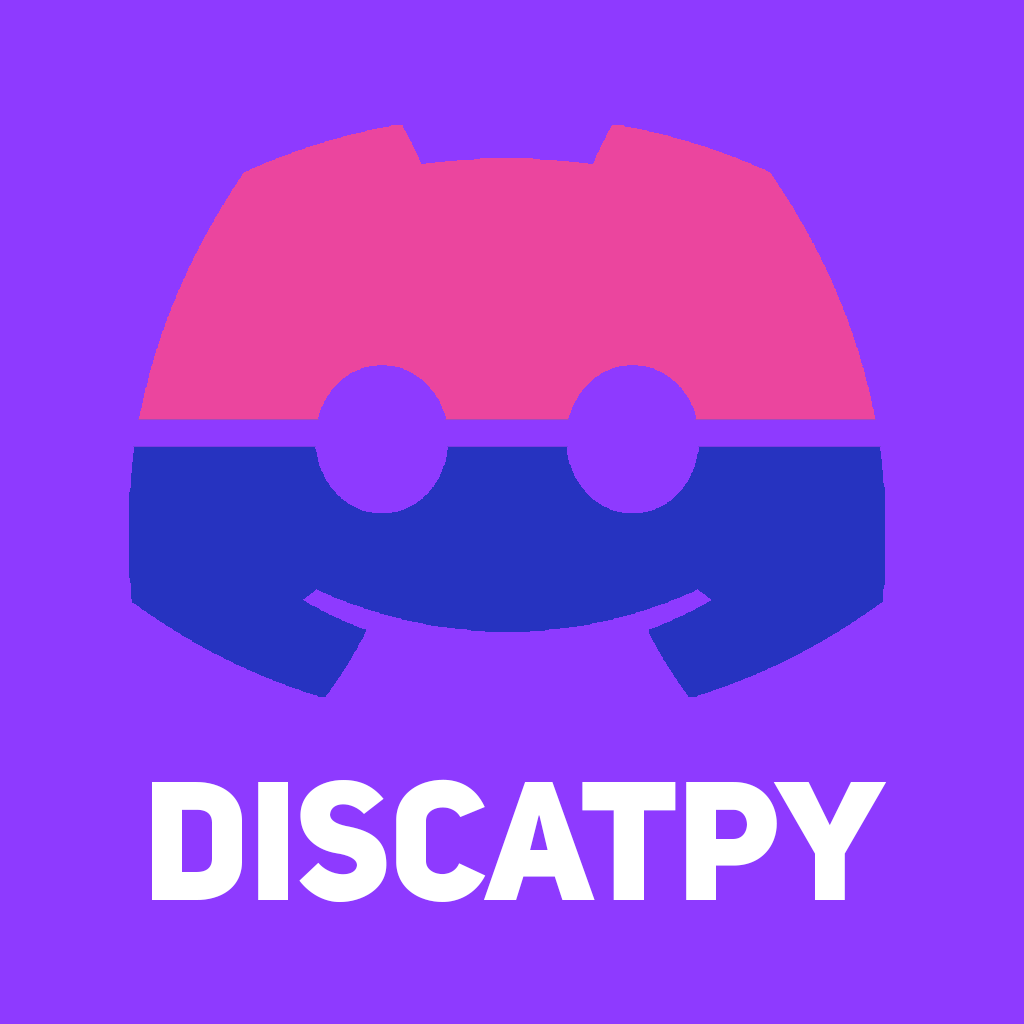
<style>
.page{position:relative;width:1024px;height:1024px;background:#8e3aff}
.page>*{position:absolute;margin:0}
.t1{font:166.7px "UniSansHeavyCAPS";letter-spacing:-0.004em;color:#ffffff}
</style>
<div class="page">
<p class="t1" style="left:152px;top:779px;width:735px;height:124px">DisCatPy</p>
</div>
